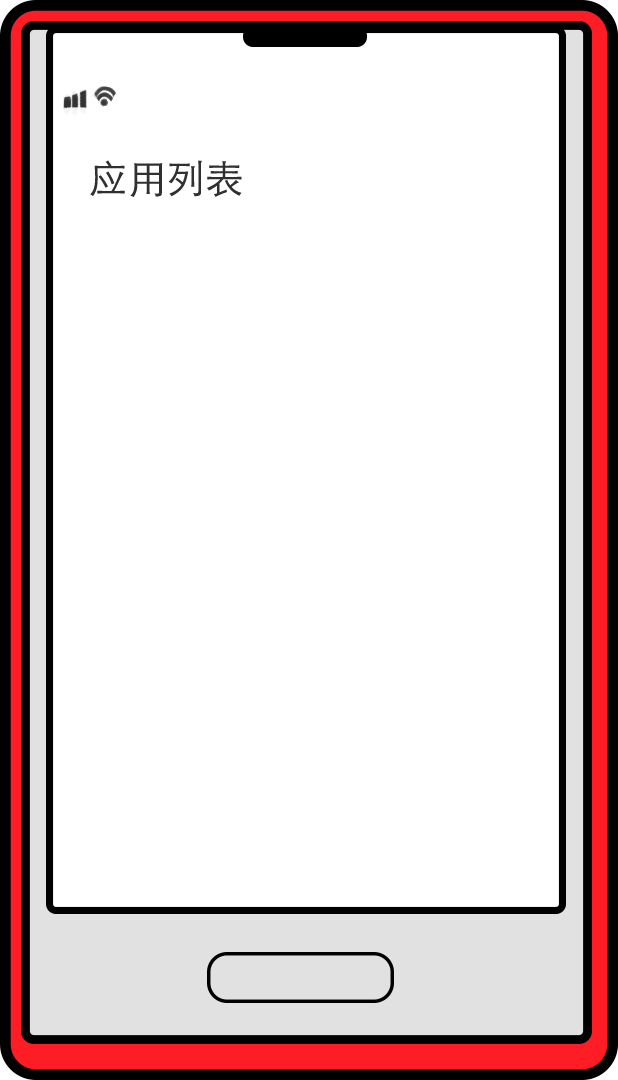
<style>
.page{position:relative;width:618px;height:1080px;background:#ffffff}
.page>*{position:absolute;margin:0}
.t1{font:38.9px "STHeitiTC-Light";color:#303030}
</style>
<div class="page">
<p class="t1" style="left:90px;top:160px;width:152px;height:37px">应用列表</p>
</div>
